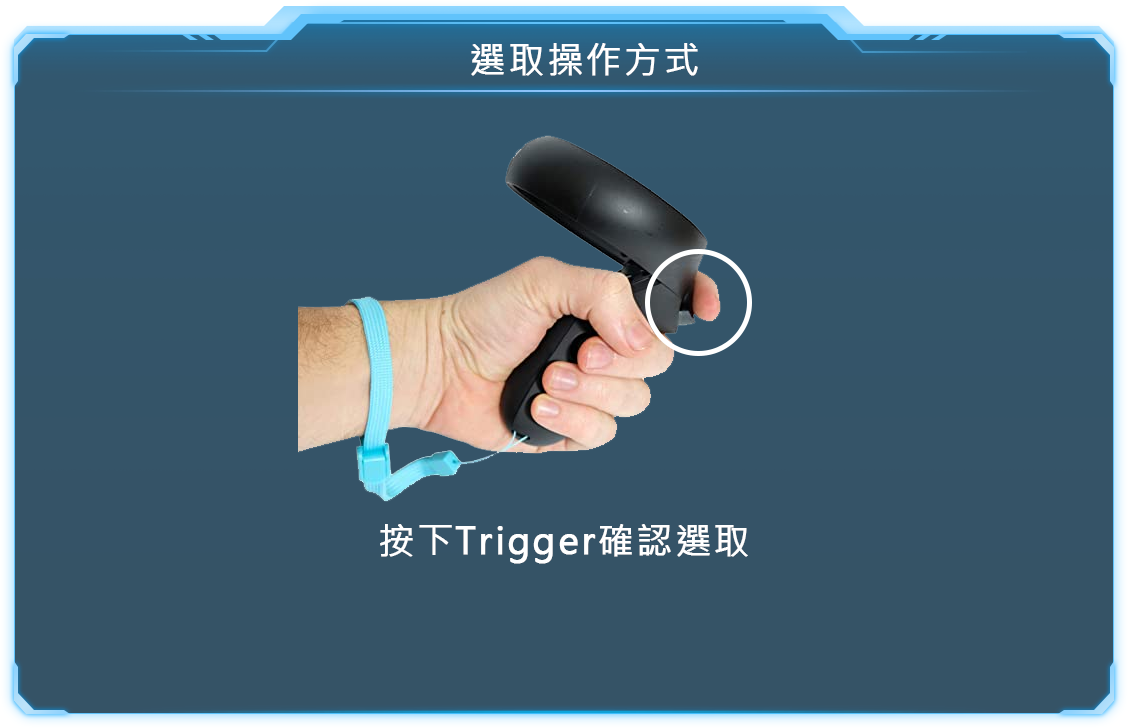
<style>
.page{position:relative;width:1128px;height:728px}
.page>*{position:absolute;margin:0}
.t1{font:36px "MicrosoftJhengHeiRegular";letter-spacing:0.05em;color:#ffffff;font-weight:bold}
</style>
<div class="page">
<p class="t1" style="left:471px;top:43px;width:227px;height:33px">選取操作方式</p>
<p class="t1" style="left:380px;top:524px;width:368px;height:40px">按下Trigger確認選取</p>
</div>
